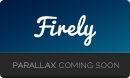
<style>
.page{position:relative;width:130px;height:78px;background:#282828}
.page>*{position:absolute;margin:0}
.t1{font:10px "Raleway-Light";letter-spacing:-0.01em;font-variant:small-caps}
.t2{font:10px "Raleway-Light";letter-spacing:-0.01em;color:#888888;font-variant:small-caps}
</style>
<div class="page">
<p class="t1" style="left:13px;top:62px;width:43px;height:6px">parallax</p>
<p class="t2" style="left:59px;top:62px;width:60px;height:6px">coming soon</p>
</div>
